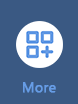
<style>
.page{position:relative;width:78px;height:104px;background:#3a5983}
.page>*{position:absolute;margin:0}
.t1{font:14px "SegoeUI";color:#669ce5;font-weight:bold}
</style>
<div class="page">
<p class="t1" style="left:23px;top:82px;width:33px;height:11px">More</p>
</div>
